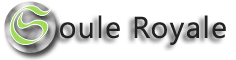
<style>
.page{position:relative;width:236px;height:60px;background:#ffffff}
.page>*{position:absolute;margin:0}
.t1{font:30px "SegoeUI";letter-spacing:0.05em;color:#222222}
</style>
<div class="page">
<p class="t1" style="left:60px;top:15px;width:166px;height:30px">oule Royale</p>
</div>
